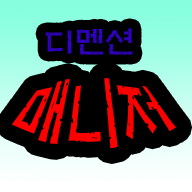
<style>
.page{position:relative;width:192px;height:192px;background:#000000}
.page>*{position:absolute;margin:0}
.t1{font:30.2px "H2mkpB";color:#3000b9}
.t2{font:48.3px "H2mkpB";color:#ff0000}
</style>
<div class="page">
<p class="t1" style="left:45px;top:28px;width:88px;height:27px">디멘션</p>
<p class="t2" style="left:12px;top:78px;width:165px;height:70px">매니저</p>
</div>
